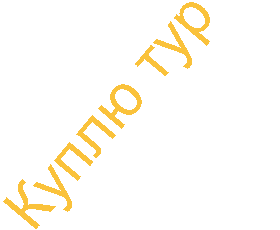
<style>
.page{position:relative;width:280px;height:230px;background:#ffffff}
.page>*{position:absolute;margin:0}
.t1{font:60px "ArialMT";color:#fac23b}
</style>
<div class="page">
<p class="t1" style="left:3px;top:2px;width:207px;height:227px;rotate:-50deg">Куплю тур</p>
</div>
